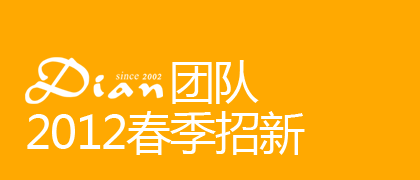
<style>
.page{position:relative;width:420px;height:180px;background:#ffa901}
.page>*{position:absolute;margin:0}
.t1{font:46.2px "MicrosoftYaHei";letter-spacing:-0.04em;color:#ffffff}
</style>
<div class="page">
<p class="t1" style="left:172px;top:60px;width:87px;height:44px">团队</p>
<p class="t1" style="left:27px;top:111px;width:278px;height:44px">2012春季招新</p>
</div>
